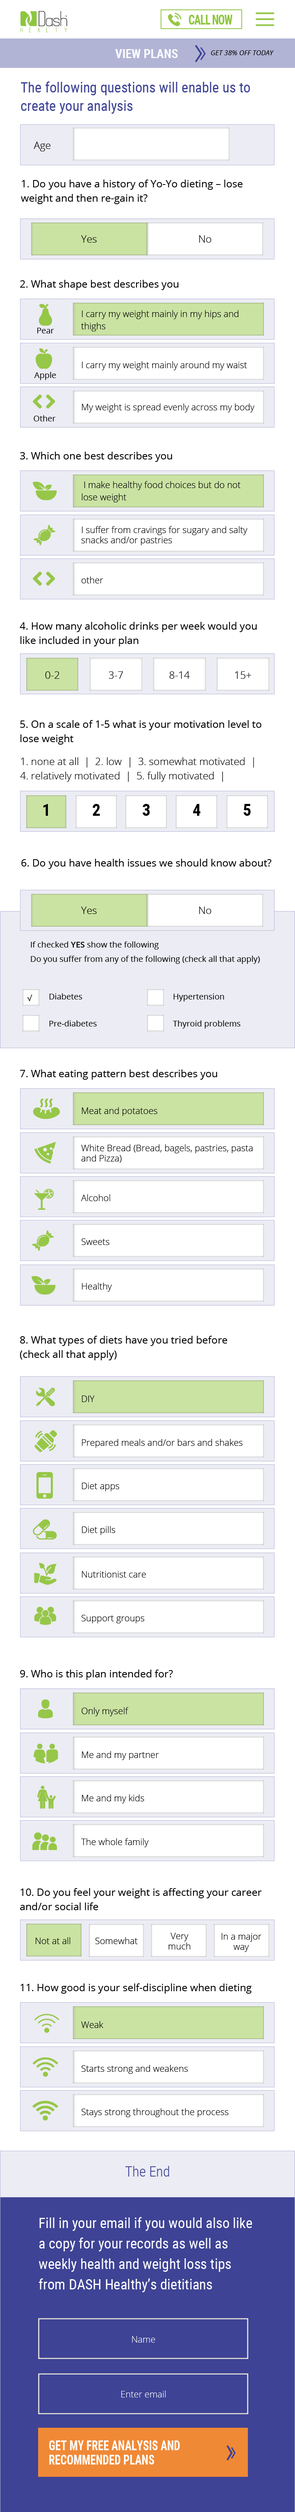
<style>
.page{position:relative;width:295px;height:2512px;background:#ffffff}
.page>*{position:absolute;margin:0}
.t1{font:13.9px "RobotoCondensed-Bold";letter-spacing:-0.05em;color:#8dc63f;scale:0.8 1}
.t2{font:12.3px "RobotoCondensed-Bold";color:#fbfbfe}
.t3{font:7px "OpenSans-Italic";color:#010101}
.t4{font:14.3px/18.4px "RobotoCondensed-Regular";color:#3e4395}
.t5{font:10.2px "OpenSans-Light";color:#010101}
.t6{font:10.2px/14.3px "OpenSans-Regular";color:#010101}
.t7{font:10.2px "OpenSans-Regular";color:#010101}
.t8{font:9px/12.3px "OpenSans-Light";color:#010101}
.t9{font:8.2px "OpenSans-Regular";color:#010101}
.t10{font:9px "OpenSans-Light";color:#010101}
.t11{font:9px/10.2px "OpenSans-Light";color:#010101}
.t12{font:10.2px/14.3px "OpenSans-Light";color:#010101}
.t13{font:16.4px "RobotoCondensed-Bold";color:#010101}
.t14{font:8.2px/14.3px "OpenSans-Regular";color:#010101}
.t15{font:8.2px/14.3px "OpenSans-SemiBold";color:#010101}
.t16{font:14.3px "RobotoCondensed-Light";color:#3e4395}
.t17{font:14.3px/20.5px "RobotoCondensed-Regular";color:#fefefe}
.t18{font:9px "OpenSans-Light";color:#fefefe}
.t19{font:13.9px/14.3px "RobotoCondensed-Bold";color:#ffffff;scale:0.8 1}
</style>
<div class="page">
<p class="t1" style="left:189px;top:15px;width:43px;height:10px">CALL NOW</p>
<p class="t2" style="left:115px;top:49px;width:63px;height:9px">VIEW PLANS</p>
<p class="t3" style="left:211px;top:50px;width:62px;height:5px">GET 38% OFF TODAY</p>
<p class="t4" style="left:21px;top:81px;width:229px;height:33px">The following questions will enable us to create your analysis</p>
<p class="t5" style="left:34px;top:142px;width:16px;height:9px">Age</p>
<p class="t6" style="left:21px;top:180px;width:221px;height:24px">1. Do you have a history of Yo-Yo dieting – lose weight and then re-gain it?</p>
<p class="t5" style="left:81px;top:235px;width:16px;height:8px">Yes</p>
<p class="t5" style="left:199px;top:235px;width:12px;height:8px">No</p>
<p class="t7" style="left:20px;top:280px;width:158px;height:10px">2. What shape best describes you</p>
<p class="t8" style="left:81px;top:310px;width:157px;height:21px">I carry my weight mainly in my hips and thighs</p>
<p class="t9" style="left:37px;top:328px;width:17px;height:5px">Pear</p>
<p class="t10" style="left:82px;top:361px;width:165px;height:9px">I carry my weight mainly around my waist</p>
<p class="t9" style="left:34px;top:372px;width:22px;height:8px">Apple</p>
<p class="t10" style="left:82px;top:403px;width:172px;height:9px">My weight is spread evenly across my body</p>
<p class="t9" style="left:34px;top:415px;width:22px;height:6px">Other</p>
<p class="t7" style="left:20px;top:452px;width:152px;height:10px">3. Which one best describes you</p>
<p class="t8" style="left:81px;top:481px;width:159px;height:21px">I make healthy food choices but do not lose weight</p>
<p class="t11" style="left:81px;top:526px;width:166px;height:19px">I suffer from cravings for sugary and salty snacks and/or pastries</p>
<p class="t10" style="left:81px;top:576px;width:22px;height:7px">other</p>
<p class="t6" style="left:20px;top:622px;width:236px;height:24px">4. How many alcoholic drinks per week would you like included in your plan</p>
<p class="t5" style="left:45px;top:671px;width:14px;height:8px">0-2</p>
<p class="t5" style="left:108px;top:671px;width:15px;height:8px">3-7</p>
<p class="t5" style="left:169px;top:671px;width:20px;height:8px">8-14</p>
<p class="t5" style="left:234px;top:671px;width:17px;height:8px">15+</p>
<p class="t6" style="left:20px;top:720px;width:241px;height:25px">5. On a scale of 1-5 what is your motivation level to lose weight</p>
<p class="t12" style="left:20px;top:757px;width:234px;height:25px">1. none at all  |  2. low  |  3. somewhat motivated  | <br>4. relatively motivated  |  5. fully motivated  |</p>
<p class="t13" style="left:43px;top:804px;width:5px;height:12px">1</p>
<p class="t13" style="left:92px;top:804px;width:8px;height:12px">2</p>
<p class="t13" style="left:142px;top:804px;width:8px;height:12px">3</p>
<p class="t13" style="left:193px;top:804px;width:7px;height:12px">4</p>
<p class="t13" style="left:243px;top:804px;width:7px;height:12px">5</p>
<p class="t7" style="left:21px;top:859px;width:250px;height:10px">6. Do you have health issues we should know about?</p>
<p class="t5" style="left:81px;top:907px;width:16px;height:7px">Yes</p>
<p class="t5" style="left:199px;top:907px;width:12px;height:7px">No</p>
<p class="t14" style="left:31px;top:941px;width:228px;height:23px">If checked <span class="t15">YES </span>show the following<br>Do you suffer from any of the following (check all that apply)</p>
<p class="t9" style="left:27px;top:995px;width:5px;height:6px">√</p>
<p class="t9" style="left:49px;top:993px;width:33px;height:6px">Diabetes</p>
<p class="t9" style="left:173px;top:993px;width:51px;height:8px">Hypertension</p>
<p class="t9" style="left:49px;top:1020px;width:48px;height:6px">Pre-diabetes</p>
<p class="t9" style="left:173px;top:1020px;width:67px;height:8px">Thyroid problems</p>
<p class="t7" style="left:20px;top:1069px;width:197px;height:11px">7. What eating pattern best describes you</p>
<p class="t10" style="left:82px;top:1107px;width:75px;height:9px">Meat and potatoes</p>
<p class="t11" style="left:81px;top:1144px;width:171px;height:19px">White Bread (Bread, bagels, pastries, pasta and Pizza)</p>
<p class="t10" style="left:81px;top:1194px;width:29px;height:7px">Alcohol</p>
<p class="t10" style="left:81px;top:1238px;width:28px;height:7px">Sweets</p>
<p class="t10" style="left:82px;top:1282px;width:30px;height:10px">Healthy</p>
<p class="t6" style="left:20px;top:1336px;width:207px;height:24px">8. What types of diets have you tried before <br>(check all that apply)</p>
<p class="t10" style="left:82px;top:1395px;width:12px;height:7px">DIY</p>
<p class="t10" style="left:82px;top:1439px;width:160px;height:9px">Prepared meals and/or bars and shakes</p>
<p class="t10" style="left:82px;top:1483px;width:37px;height:8px">Diet apps</p>
<p class="t10" style="left:82px;top:1526px;width:33px;height:9px">Diet pills</p>
<p class="t10" style="left:82px;top:1571px;width:64px;height:6px">Nutritionist care</p>
<p class="t10" style="left:81px;top:1615px;width:63px;height:8px">Support groups</p>
<p class="t7" style="left:20px;top:1670px;width:153px;height:10px">9. Who is this plan intended for?</p>
<p class="t10" style="left:81px;top:1707px;width:47px;height:9px">Only myself</p>
<p class="t10" style="left:82px;top:1751px;width:77px;height:9px">Me and my partner</p>
<p class="t10" style="left:82px;top:1794px;width:62px;height:9px">Me and my kids</p>
<p class="t10" style="left:81px;top:1838px;width:67px;height:9px">The whole family</p>
<p class="t6" style="left:20px;top:1888px;width:241px;height:22px">10. Do you feel your weight is affecting your career and/or social life</p>
<p class="t10" style="left:36px;top:1937px;width:34px;height:7px">Not at all</p>
<p class="t10" style="left:95px;top:1937px;width:42px;height:7px">Somewhat</p>
<p class="t11" style="left:168px;top:1933px;width:22px;height:16px;text-align:center">Very much</p>
<p class="t11" style="left:221px;top:1933px;width:40px;height:19px;text-align:center">In a major way</p>
<p class="t7" style="left:20px;top:1983px;width:231px;height:11px">11. How good is your self-discipline when dieting</p>
<p class="t10" style="left:81px;top:2021px;width:22px;height:7px">Weak</p>
<p class="t10" style="left:81px;top:2065px;width:107px;height:9px">Starts strong and weakens</p>
<p class="t10" style="left:81px;top:2108px;width:147px;height:9px">Stays strong throughout the process</p>
<p class="t16" style="left:125px;top:2166px;width:44px;height:10px">The End</p>
<p class="t17" style="left:38px;top:2217px;width:214px;height:75px">Fill in your email if you would also like a copy for your records as well as weekly health and weight loss tips from DASH Healthy’s dietitians</p>
<p class="t18" style="left:132px;top:2336px;width:23px;height:6px">Name</p>
<p class="t18" style="left:121px;top:2390px;width:45px;height:7px">Enter email</p>
<p class="t19" style="left:49px;top:2440px;width:131px;height:24px">GET MY FREE ANALYSIS AND RECOMMENDED PLANS</p>
</div>
